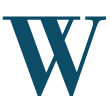
<style>
.page{position:relative;width:110px;height:110px;background:#ffffff}
.page>*{position:absolute;margin:0}
.t1{font:112.1px "OPTIBodoniAntiqua-Medium";color:#0d4c67}
</style>
<div class="page">
<p class="t1" style="left:2px;top:16px;width:104px;height:80px">W</p>
</div>
